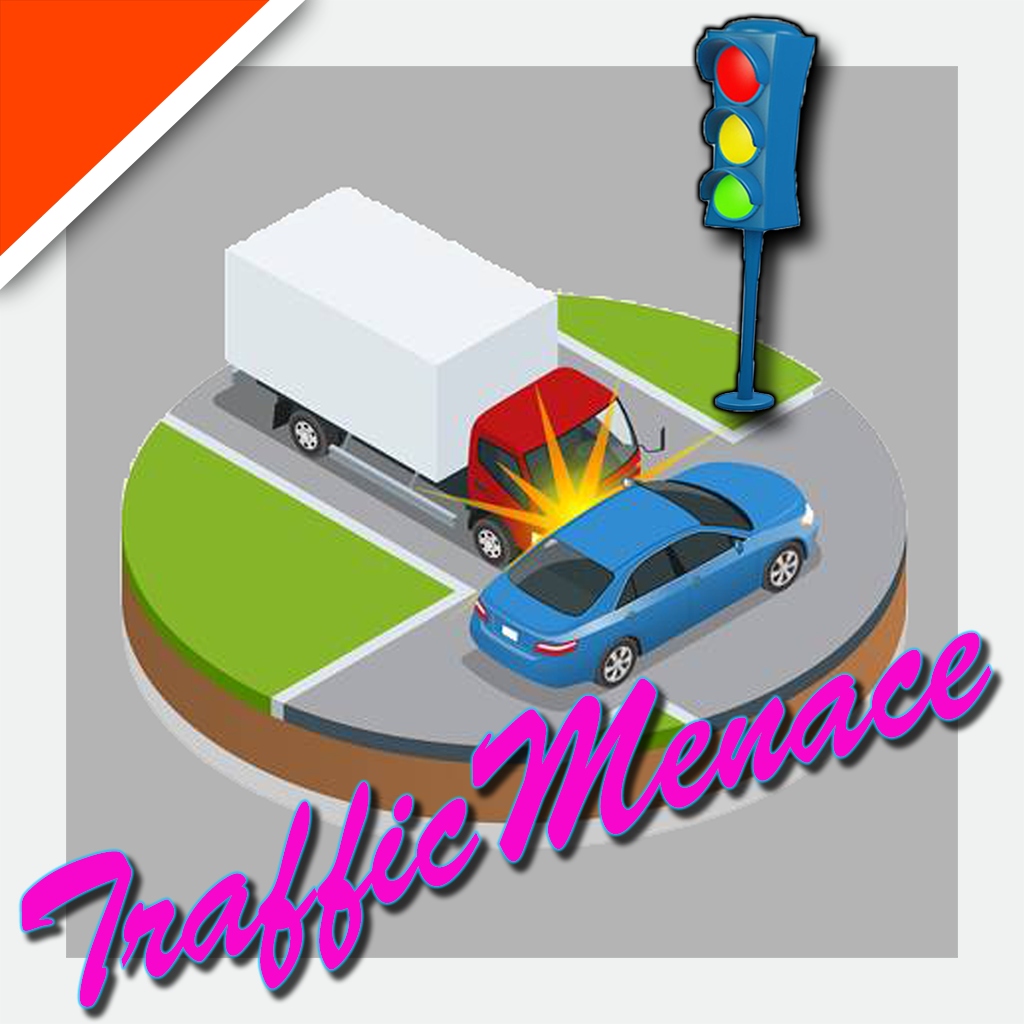
<style>
.page{position:relative;width:1024px;height:1024px;background:#b4b4b4}
.page>*{position:absolute;margin:0}
.t1{font:196px "BrushScriptStd";color:#f706cc;scale:0.87 1}
</style>
<div class="page">
<p class="t1" style="left:21px;top:632px;width:971px;height:375px;rotate:-18deg">TrafficMenace</p>
</div>
